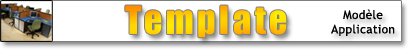
<style>
.page{position:relative;width:410px;height:50px;background:#ffffff}
.page>*{position:absolute;margin:0}
.t1{font:36px "Impact";letter-spacing:0.1em;color:#ffce00}
.t2{font:12px "TrebuchetMS";letter-spacing:0.025em;color:#000000}
</style>
<div class="page">
<p class="t1" style="left:125px;top:5px;width:162px;height:33px">Template</p>
<p class="t2" style="left:331px;top:9px;width:64px;height:27px;text-align:center">Modèle<br>Application</p>
</div>
